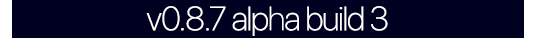
<style>
.page{position:relative;width:536px;height:38px;background:#000121}
.page>*{position:absolute;margin:0}
.t1{font:33.3px "SFProDisplay-Thin";letter-spacing:-0.04em;color:#ffffff;font-weight:bold}
</style>
<div class="page">
<p class="t1" style="left:146px;top:6px;width:242px;height:30px">v0.8.7 alpha build 3</p>
</div>
